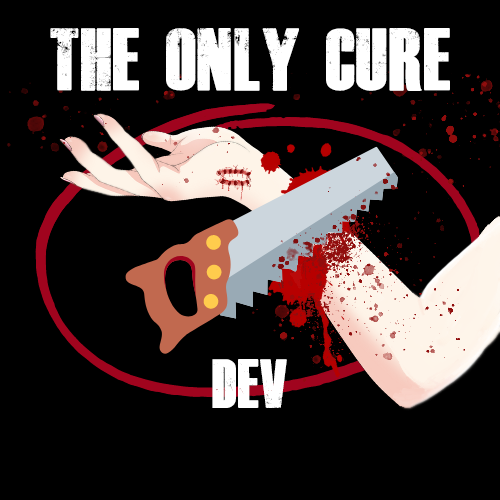
<style>
.page{position:relative;width:500px;height:500px;background:#000000}
.page>*{position:absolute;margin:0}
.t1{font:61.1px "DeadKansas";color:#ffffff;scale:0.93 1}
.t2{font:47.9px "DeadKansas";color:#ffffff;scale:0.93 1}
</style>
<div class="page">
<p class="t1" style="left:50px;top:28px;width:400px;height:63px">THE ONLY CURE</p>
<p class="t2" style="left:212px;top:359px;width:75px;height:49px">DEV</p>
</div>
